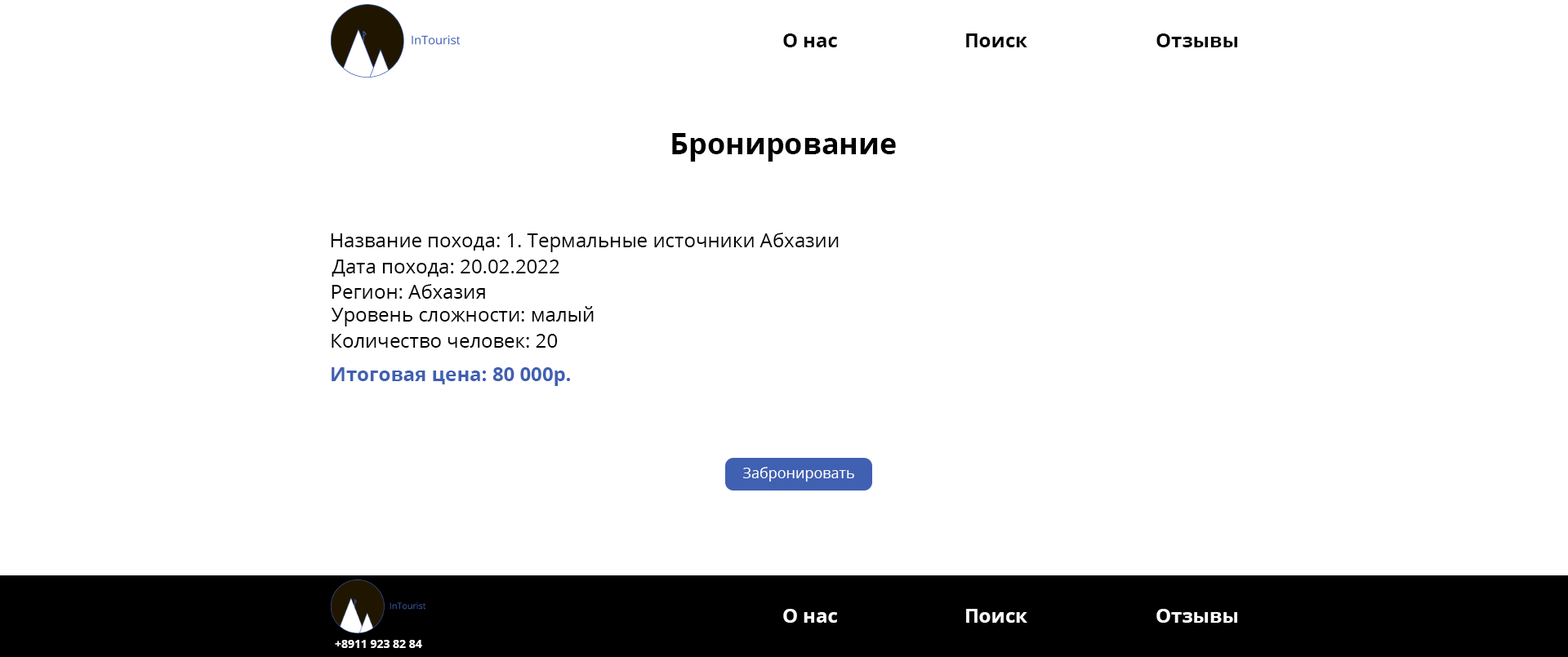
<style>
.page{position:relative;width:1568px;height:657px;background:#ffffff}
.page>*{position:absolute;margin:0}
.t1{font:19.6px "OpenSans-Bold";color:#000000}
.t2{font:29.4px "OpenSans-Bold";color:#000000}
.t3{font:19.6px "OpenSans-Regular";color:#000000}
.t4{font:19.6px "OpenSans-Bold";color:#4060b2}
.t5{font:14.7px "OpenSans-Regular";color:#ffffff}
.t6{font:19.6px "OpenSans-Bold";color:#ffffff}
.t7{font:11.4px "OpenSans-Bold";color:#ffffff}
</style>
<div class="page">
<p class="t1" style="left:783px;top:33px;width:54px;height:14px">О нас</p>
<p class="t1" style="left:966px;top:33px;width:61px;height:14px">Поиск</p>
<p class="t1" style="left:1156px;top:33px;width:81px;height:14px">Отзывы</p>
<p class="t2" style="left:672px;top:133px;width:224px;height:29px">Бронирование</p>
<p class="t3" style="left:331px;top:233px;width:508px;height:19px">Название похода: 1. Термальные источники Абхазии</p>
<p class="t3" style="left:332px;top:260px;width:227px;height:17px">Дата похода: 20.02.2022</p>
<p class="t3" style="left:332px;top:284px;width:153px;height:15px">Регион: Абхазия</p>
<p class="t3" style="left:331px;top:306px;width:263px;height:21px">Уровень сложности: малый</p>
<p class="t3" style="left:332px;top:334px;width:226px;height:14px">Количество человек: 20</p>
<p class="t4" style="left:332px;top:368px;width:238px;height:18px">Итоговая цена: 80 000р.</p>
<p class="t5" style="left:743px;top:467px;width:111px;height:15px">Забронировать</p>
<p class="t6" style="left:783px;top:609px;width:54px;height:14px">О нас</p>
<p class="t6" style="left:966px;top:609px;width:61px;height:14px">Поиск</p>
<p class="t6" style="left:1156px;top:609px;width:81px;height:14px">Отзывы</p>
<p class="t7" style="left:335px;top:640px;width:87px;height:8px">+8911 923 82 84</p>
</div>
